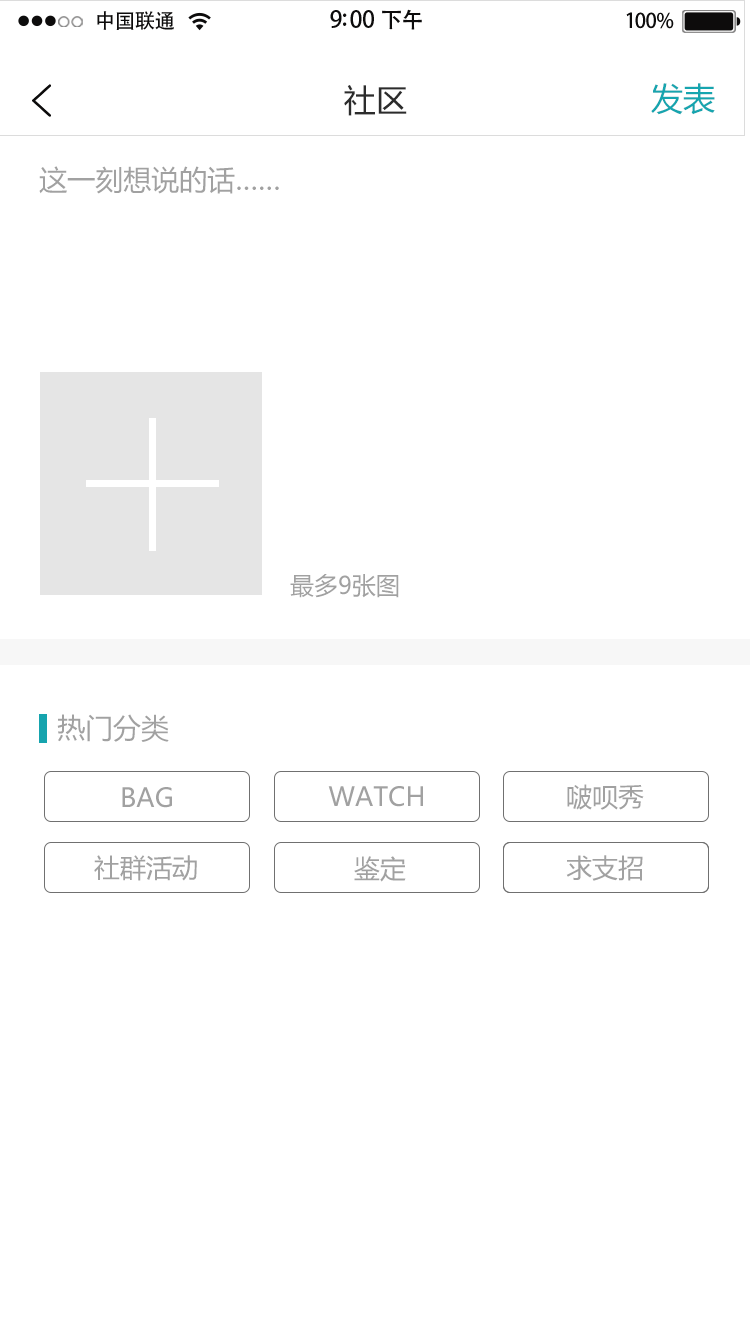
<style>
.page{position:relative;width:750px;height:1334px;background:#ffffff}
.page>*{position:absolute;margin:0}
.t1{font:20.4px "AdobeHeitiStd-Regular";letter-spacing:-0.02em;color:#000000}
.t2{font:23px "AdobeHeitiStd-Regular";letter-spacing:-0.02em;color:#000000}
.t3{font:22px "AdobeHeitiStd-Regular";letter-spacing:-0.02em;color:#000000}
.t4{font:20.4px "AdobeHeitiStd-Regular";letter-spacing:-0.02em;color:#010101}
.t5{font:32px "MicrosoftYaHei";color:#2c2c2c}
.t6{font:32px "MicrosoftYaHei";color:#16a5af}
.t7{font:28px "MicrosoftYaHei";color:#a1a1a1}
.t8{font:24px "MicrosoftYaHei";color:#a1a1a1}
.t9{font:26px "MicrosoftYaHei";color:#a1a1a1}
</style>
<div class="page">
<p class="t1" style="left:97px;top:11px;width:77px;height:19px">中国联通</p>
<p class="t2" style="left:330px;top:9px;width:92px;height:21px">9:00 <span class="t3">下午</span></p>
<p class="t4" style="left:626px;top:12px;width:48px;height:17px">100%</p>
<p class="t5" style="left:344px;top:85px;width:63px;height:31px">社区</p>
<p class="t6" style="left:651px;top:83px;width:64px;height:32px">发表</p>
<p class="t7" style="left:39px;top:166px;width:240px;height:28px">这一刻想说的话……</p>
<p class="t8" style="left:290px;top:574px;width:109px;height:24px">最多9张图</p>
<p class="t7" style="left:57px;top:714px;width:112px;height:28px">热门分类</p>
<p class="t9" style="left:567px;top:784px;width:77px;height:26px">啵呗秀</p>
<p class="t9" style="left:122px;top:787px;width:50px;height:21px">BAG</p>
<p class="t9" style="left:328px;top:786px;width:95px;height:21px">WATCH</p>
<p class="t9" style="left:94px;top:855px;width:103px;height:26px">社群活动</p>
<p class="t9" style="left:354px;top:856px;width:52px;height:26px">鉴定</p>
<p class="t9" style="left:566px;top:855px;width:77px;height:26px">求支招</p>
</div>
